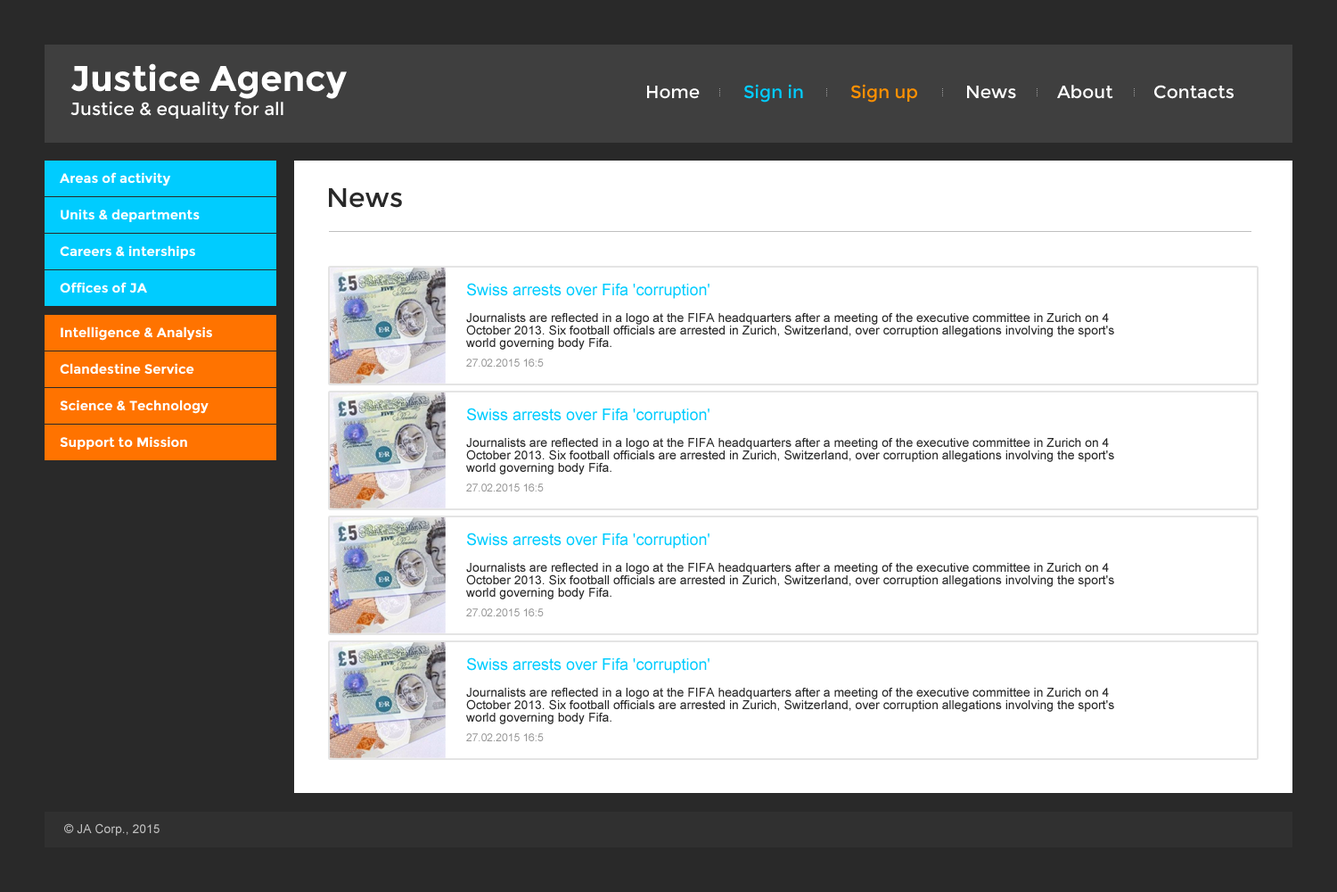
<style>
.page{position:relative;width:1337px;height:892px;background:#ffffff}
.page>*{position:absolute;margin:0}
.t1{font:35.7px "Montserrat-Bold";color:#ffffff}
.t2{font:17.8px "Montserrat-Regular";color:#ffffff}
.t3{font:17.8px "Montserrat-Regular";color:#00ccff}
.t4{font:17.8px "Montserrat-Regular";color:#ff9000}
.t5{font:13.4px "Montserrat-Bold";color:#ffffff}
.t6{font:26.7px "Montserrat-Regular";color:#292929}
.t7{font:16px "ArialMT";color:#00ccff}
.t8{font:12.5px/12.5px "ArialMT";color:#292929}
.t9{font:10.7px "ArialMT";color:#959595}
.t10{font:12.5px "ArialMT";color:#bfbfbf}
</style>
<div class="page">
<p class="t1" style="left:71px;top:63px;width:276px;height:36px">Justice Agency</p>
<p class="t2" style="left:647px;top:86px;width:53px;height:13px">Home</p>
<p class="t3" style="left:744px;top:84px;width:59px;height:19px">Sign in</p>
<p class="t4" style="left:851px;top:84px;width:66px;height:19px">Sign up</p>
<p class="t2" style="left:967px;top:86px;width:49px;height:13px">News</p>
<p class="t2" style="left:1057px;top:85px;width:57px;height:14px">About</p>
<p class="t2" style="left:1155px;top:85px;width:79px;height:14px">Contacts</p>
<p class="t2" style="left:70px;top:101px;width:214px;height:18px">Justice &amp; equality for all</p>
<p class="t5" style="left:60px;top:172px;width:111px;height:14px">Areas of activity</p>
<p class="t6" style="left:329px;top:188px;width:73px;height:20px">News</p>
<p class="t5" style="left:61px;top:209px;width:139px;height:13px">Units &amp; departments</p>
<p class="t5" style="left:60px;top:245px;width:135px;height:14px">Careers &amp; interships</p>
<p class="t5" style="left:60px;top:282px;width:87px;height:10px">Offices of JA</p>
<p class="t7" style="left:467px;top:283px;width:243px;height:16px">Swiss arrests over Fifa 'corruption'</p>
<p class="t8" style="left:466px;top:313px;width:649px;height:37px">Journalists are reflected in a logo at the FIFA headquarters after a meeting of the executive committee in Zurich on 4<br>October 2013. Six football officials are arrested in Zurich, Switzerland, over corruption allegations involving the sport's<br>world governing body Fifa.</p>
<p class="t5" style="left:61px;top:326px;width:151px;height:15px">Intelligence &amp; Analysis</p>
<p class="t5" style="left:60px;top:363px;width:134px;height:11px">Clandestine Service</p>
<p class="t9" style="left:466px;top:358px;width:78px;height:8px">27.02.2015 16:5</p>
<p class="t5" style="left:60px;top:399px;width:149px;height:15px">Science &amp; Technology</p>
<p class="t7" style="left:467px;top:407px;width:243px;height:17px">Swiss arrests over Fifa 'corruption'</p>
<p class="t5" style="left:60px;top:436px;width:127px;height:13px">Support to Mission</p>
<p class="t8" style="left:466px;top:438px;width:649px;height:36px">Journalists are reflected in a logo at the FIFA headquarters after a meeting of the executive committee in Zurich on 4<br>October 2013. Six football officials are arrested in Zurich, Switzerland, over corruption allegations involving the sport's<br>world governing body Fifa.</p>
<p class="t9" style="left:466px;top:483px;width:78px;height:8px">27.02.2015 16:5</p>
<p class="t7" style="left:467px;top:532px;width:243px;height:16px">Swiss arrests over Fifa 'corruption'</p>
<p class="t8" style="left:466px;top:563px;width:649px;height:36px">Journalists are reflected in a logo at the FIFA headquarters after a meeting of the executive committee in Zurich on 4<br>October 2013. Six football officials are arrested in Zurich, Switzerland, over corruption allegations involving the sport's<br>world governing body Fifa.</p>
<p class="t9" style="left:466px;top:608px;width:78px;height:8px">27.02.2015 16:5</p>
<p class="t7" style="left:467px;top:657px;width:243px;height:16px">Swiss arrests over Fifa 'corruption'</p>
<p class="t8" style="left:466px;top:687px;width:649px;height:37px">Journalists are reflected in a logo at the FIFA headquarters after a meeting of the executive committee in Zurich on 4<br>October 2013. Six football officials are arrested in Zurich, Switzerland, over corruption allegations involving the sport's<br>world governing body Fifa.</p>
<p class="t9" style="left:466px;top:733px;width:78px;height:8px">27.02.2015 16:5</p>
<p class="t10" style="left:64px;top:823px;width:96px;height:12px">© JA Corp., 2015</p>
</div>
